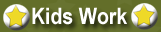
<style>
.page{position:relative;width:161px;height:32px;background:#636e29}
.page>*{position:absolute;margin:0}
.t1{font:22.8px "Arial-BoldMT";color:#ffffff;scale:0.86 1}
</style>
<div class="page">
<p class="t1" style="left:32px;top:7px;width:95px;height:18px">Kids Work</p>
</div>
